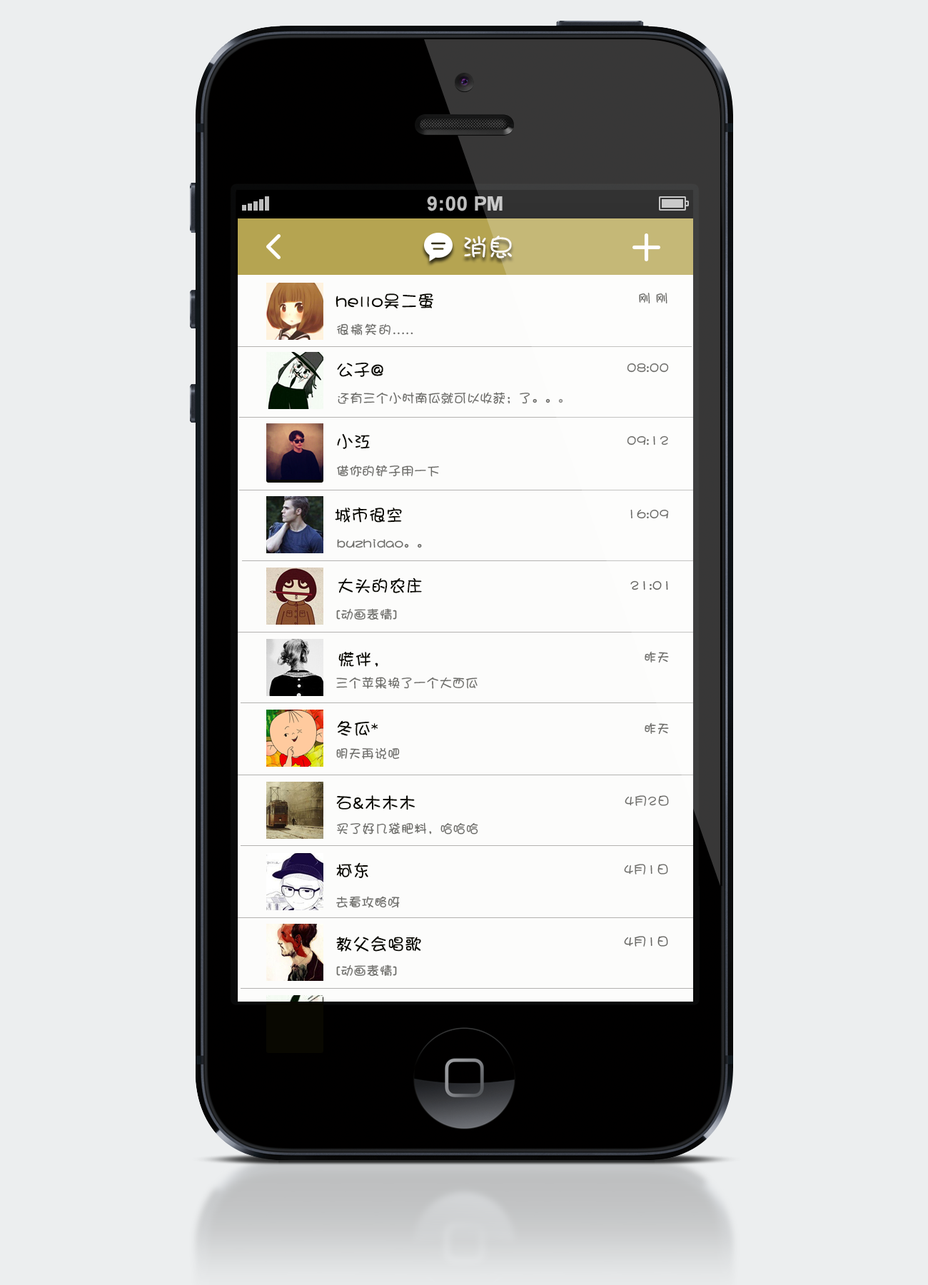
<style>
.page{position:relative;width:928px;height:1285px;background:#eceeef}
.page>*{position:absolute;margin:0}
.t1{font:25.7px "DFPShaoNvW5";letter-spacing:0.02em;color:#fbf9f8}
.t2{font:17.1px "DFPShaoNvW5";letter-spacing:0.01em;color:#090801}
.t3{font:12.8px "DFPShaoNvW5";letter-spacing:0.01em;color:#696966}
.t4{font:12.8px "DFPShaoNvW5";letter-spacing:0.1em;color:#696965}
.t5{font:12.8px "DFPShaoNvW5";letter-spacing:0.01em;color:#696965}
.t6{font:12.8px "DFPShaoNvW5";letter-spacing:0.01em;color:#61605d}
.t7{font:12.8px "DFPShaoNvW5";letter-spacing:0.01em;color:#646360}
</style>
<div class="page">
<p class="t1" style="left:464px;top:236px;width:48px;height:22px">消息</p>
<p class="t2" style="left:336px;top:293px;width:98px;height:16px">hello吴二蛋</p>
<p class="t3" style="left:639px;top:293px;width:28px;height:11px">刚 刚</p>
<p class="t4" style="left:337px;top:323px;width:76px;height:13px">很搞笑的.....</p>
<p class="t2" style="left:337px;top:363px;width:46px;height:14px">公子@</p>
<p class="t3" style="left:627px;top:363px;width:42px;height:10px">08:00</p>
<p class="t5" style="left:338px;top:392px;width:225px;height:12px">还有三个小时南瓜就可以收获；了。。。</p>
<p class="t2" style="left:337px;top:433px;width:33px;height:16px">小江</p>
<p class="t3" style="left:627px;top:435px;width:41px;height:10px">09:12</p>
<p class="t5" style="left:337px;top:465px;width:102px;height:12px">借你的铲子用一下</p>
<p class="t2" style="left:335px;top:507px;width:67px;height:16px">城市很空</p>
<p class="t3" style="left:630px;top:509px;width:39px;height:10px">16:09</p>
<p class="t5" style="left:337px;top:539px;width:85px;height:9px">buzhidao。。</p>
<p class="t2" style="left:338px;top:578px;width:84px;height:15px">大头的农庄</p>
<p class="t6" style="left:630px;top:580px;width:38px;height:10px">21:01</p>
<p class="t5" style="left:336px;top:608px;width:61px;height:12px">[动画表情]</p>
<p class="t2" style="left:338px;top:651px;width:40px;height:16px">慌伴，</p>
<p class="t3" style="left:645px;top:651px;width:24px;height:12px">昨天</p>
<p class="t5" style="left:336px;top:677px;width:142px;height:12px">三个苹果换了一个大西瓜</p>
<p class="t2" style="left:337px;top:720px;width:41px;height:16px">冬瓜*</p>
<p class="t5" style="left:645px;top:722px;width:24px;height:13px">昨天</p>
<p class="t5" style="left:336px;top:747px;width:64px;height:13px">明天再说吧</p>
<p class="t2" style="left:336px;top:795px;width:79px;height:15px">石&amp;木木木</p>
<p class="t5" style="left:625px;top:795px;width:44px;height:11px">4月2日</p>
<p class="t5" style="left:337px;top:822px;width:141px;height:12px">买了好几袋肥料，哈哈哈</p>
<p class="t2" style="left:336px;top:862px;width:32px;height:16px">柯东</p>
<p class="t5" style="left:624px;top:864px;width:44px;height:10px">4月1日</p>
<p class="t5" style="left:336px;top:896px;width:64px;height:12px">去看攻略呀</p>
<p class="t2" style="left:336px;top:936px;width:85px;height:16px">教父会唱歌</p>
<p class="t7" style="left:624px;top:936px;width:44px;height:11px">4月1日</p>
<p class="t5" style="left:336px;top:964px;width:61px;height:13px">[动画表情]</p>
</div>
